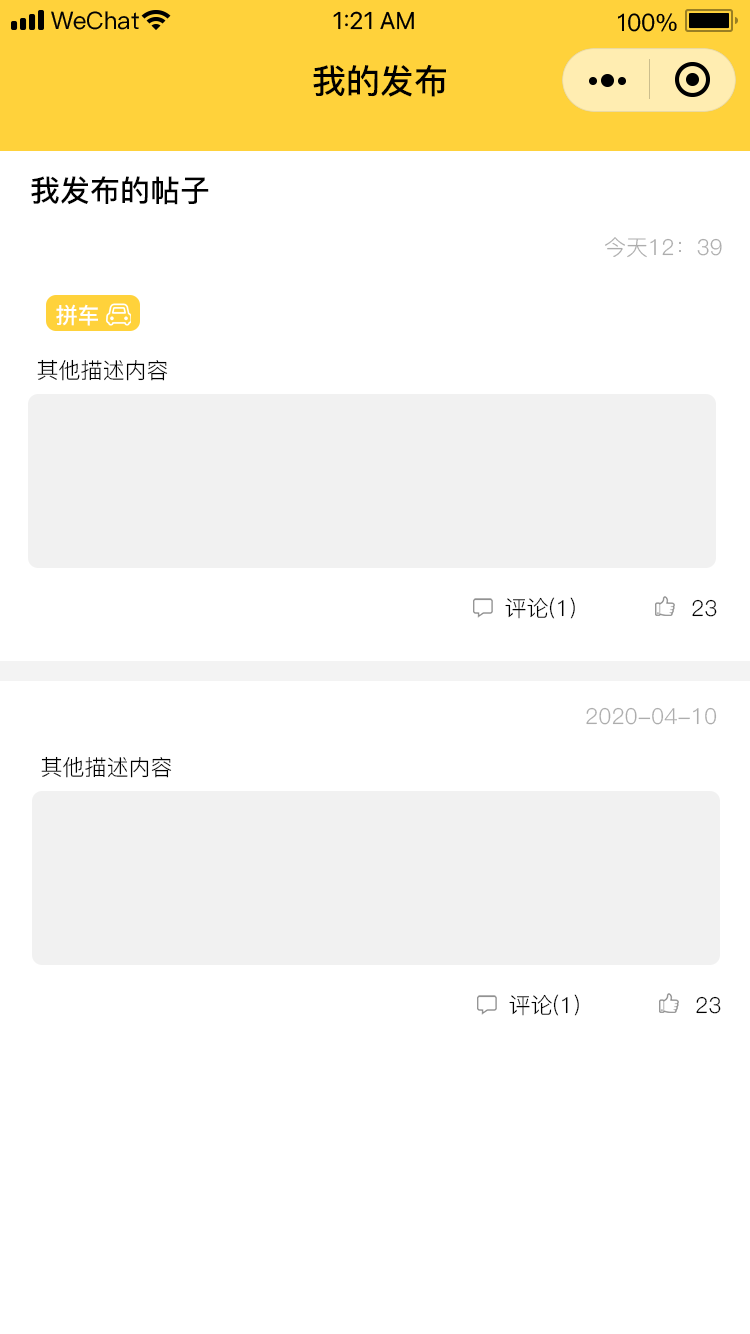
<style>
.page{position:relative;width:750px;height:1334px;background:#ffffff}
.page>*{position:absolute;margin:0}
.t1{font:34px "PingFang-SC-Bold";color:#000000}
.t2{font:30px "PingFang-SC-Bold";color:#000000}
.t3{font:22px "PingFang-SC-Regular";color:#adadad}
.t4{font:22px "PingFang-SC-Bold";color:#ffffff}
.t5{font:22px "PingFang-SC-Regular";color:#000000}
</style>
<div class="page">
<p class="t1" style="left:313px;top:65px;width:133px;height:32px">我的发布</p>
<p class="t2" style="left:31px;top:176px;width:178px;height:29px">我发布的帖子</p>
<p class="t3" style="left:605px;top:237px;width:117px;height:21px">今天12：39</p>
<p class="t4" style="left:56px;top:304px;width:42px;height:22px">拼车</p>
<p class="t5" style="left:37px;top:359px;width:131px;height:22px">其他描述内容</p>
<p class="t5" style="left:505px;top:597px;width:70px;height:22px">评论(1)</p>
<p class="t5" style="left:692px;top:599px;width:25px;height:18px">23</p>
<p class="t3" style="left:586px;top:707px;width:131px;height:18px">2020-04-10</p>
<p class="t5" style="left:41px;top:756px;width:131px;height:22px">其他描述内容</p>
<p class="t5" style="left:509px;top:994px;width:70px;height:22px">评论(1)</p>
<p class="t5" style="left:696px;top:996px;width:25px;height:18px">23</p>
</div>
